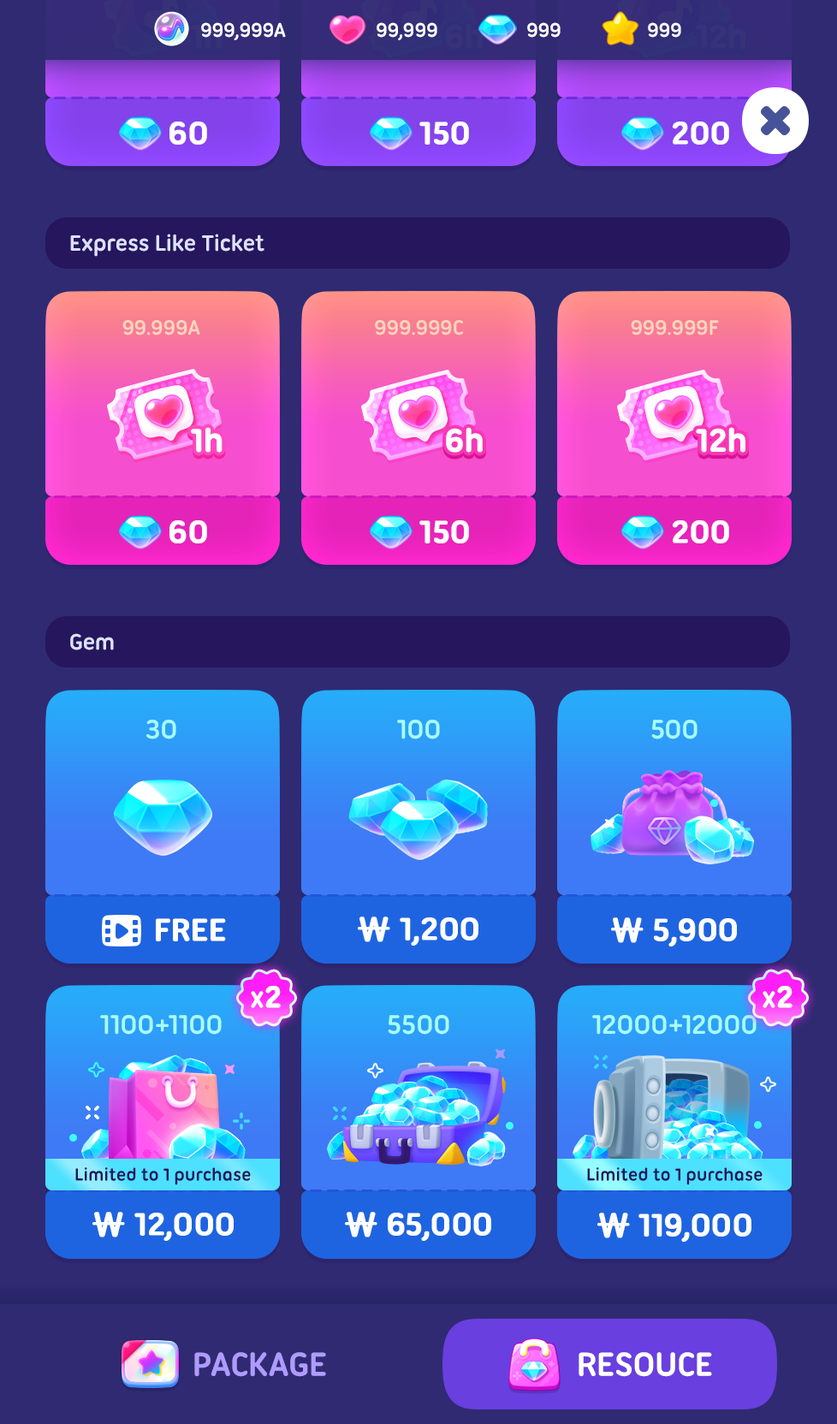
<style>
.page{position:relative;width:837px;height:1424px;background:#302a72}
.page>*{position:absolute;margin:0}
.t1{font:21.4px "UbuntuTitling-Bold";letter-spacing:-0.025em;color:#ffffff}
.t2{font:34.2px "UbuntuTitling-Bold";letter-spacing:-0.025em;color:#383278;font-weight:bold}
.t3{font:34.2px "UbuntuTitling-Bold";letter-spacing:-0.025em;color:#ffffff;text-transform:uppercase;font-weight:bold}
.t4{font:24px "UbuntuTitling-Bold";letter-spacing:-0.025em;color:#dde1ff}
.t5{font:22.3px "UbuntuTitling-Bold";letter-spacing:-0.025em;color:#ffd4bc}
.t6{font:34.2px "UbuntuTitling-Bold";letter-spacing:-0.025em;color:#ffffff;font-weight:bold}
.t7{font:29.1px "UbuntuTitling-Bold";letter-spacing:-0.025em;color:#a8ffff}
.t8{font:34.2px "NanumSquareRoundOTFEB";letter-spacing:-0.025em;color:#ffffff;text-transform:uppercase;font-weight:bold}
.t9{font:23.8px "UbuntuTitling-Bold";letter-spacing:-0.01em;color:#ffffff;text-transform:uppercase;font-weight:bold}
.t10{font:32.1px "UbuntuTitling-Bold";letter-spacing:-0.01em;color:#ffffff;text-transform:uppercase;font-weight:bold}
.t11{font:18.8px "UbuntuTitling-Bold";letter-spacing:-0.025em;color:#1f165d}
.t12{font:36px "UbuntuTitling-Bold";letter-spacing:-0.025em;color:#af9bff;text-transform:uppercase}
.t13{font:36px "UbuntuTitling-Bold";letter-spacing:-0.025em;color:#ffffff;text-transform:uppercase}
</style>
<div class="page">
<p class="t1" style="left:201px;top:22px;width:85px;height:18px">999,999A</p>
<p class="t1" style="left:377px;top:22px;width:60px;height:18px">99,999</p>
<p class="t2" style="left:446px;top:23px;width:37px;height:26px">6h</p>
<p class="t1" style="left:527px;top:22px;width:34px;height:16px">999</p>
<p class="t1" style="left:648px;top:22px;width:33px;height:16px">999</p>
<p class="t2" style="left:696px;top:23px;width:50px;height:26px">12h</p>
<p class="t3" style="left:169px;top:122px;width:38px;height:23px">60</p>
<p class="t3" style="left:419px;top:122px;width:50px;height:23px">150</p>
<p class="t3" style="left:673px;top:122px;width:56px;height:23px">200</p>
<p class="t4" style="left:70px;top:234px;width:195px;height:23px">Express Like Ticket</p>
<p class="t5" style="left:122px;top:320px;width:78px;height:16px">99.999A</p>
<p class="t5" style="left:375px;top:320px;width:88px;height:16px">999.999C</p>
<p class="t5" style="left:631px;top:320px;width:88px;height:16px">999.999F</p>
<p class="t6" style="left:191px;top:427px;width:32px;height:26px">1h</p>
<p class="t6" style="left:446px;top:427px;width:37px;height:26px">6h</p>
<p class="t6" style="left:696px;top:427px;width:50px;height:26px">12h</p>
<p class="t3" style="left:169px;top:520px;width:38px;height:24px">60</p>
<p class="t3" style="left:419px;top:520px;width:50px;height:24px">150</p>
<p class="t3" style="left:673px;top:520px;width:56px;height:24px">200</p>
<p class="t4" style="left:70px;top:633px;width:44px;height:18px">Gem</p>
<p class="t7" style="left:146px;top:720px;width:30px;height:20px">30</p>
<p class="t7" style="left:397px;top:720px;width:43px;height:20px">100</p>
<p class="t7" style="left:651px;top:720px;width:47px;height:20px">500</p>
<p class="t3" style="left:358px;top:917px;width:121px;height:29px"><span class="t8">₩ </span>1,200</p>
<p class="t3" style="left:611px;top:918px;width:126px;height:29px"><span class="t8">₩ </span>5,900</p>
<p class="t3" style="left:156px;top:918px;width:70px;height:24px">Free</p>
<p class="t9" style="left:251px;top:986px;width:30px;height:22px">x<span class="t10">2</span></p>
<p class="t9" style="left:763px;top:986px;width:30px;height:22px">x<span class="t10">2</span></p>
<p class="t7" style="left:100px;top:1015px;width:122px;height:20px">1100+1100</p>
<p class="t7" style="left:388px;top:1015px;width:61px;height:20px">5500</p>
<p class="t7" style="left:592px;top:1015px;width:165px;height:20px">12000+12000</p>
<p class="t11" style="left:75px;top:1168px;width:176px;height:18px">Limited to 1 purchase</p>
<p class="t11" style="left:587px;top:1168px;width:176px;height:18px">Limited to 1 purchase</p>
<p class="t3" style="left:92px;top:1212px;width:142px;height:29px"><span class="t8">₩ </span>12,000</p>
<p class="t3" style="left:345px;top:1212px;width:146px;height:29px"><span class="t8">₩ </span>65,000</p>
<p class="t3" style="left:597px;top:1213px;width:155px;height:29px"><span class="t8">₩ </span>119,000</p>
<p class="t12" style="left:194px;top:1352px;width:132px;height:25px">Package</p>
<p class="t13" style="left:579px;top:1352px;width:133px;height:25px">Resouce</p>
</div>
